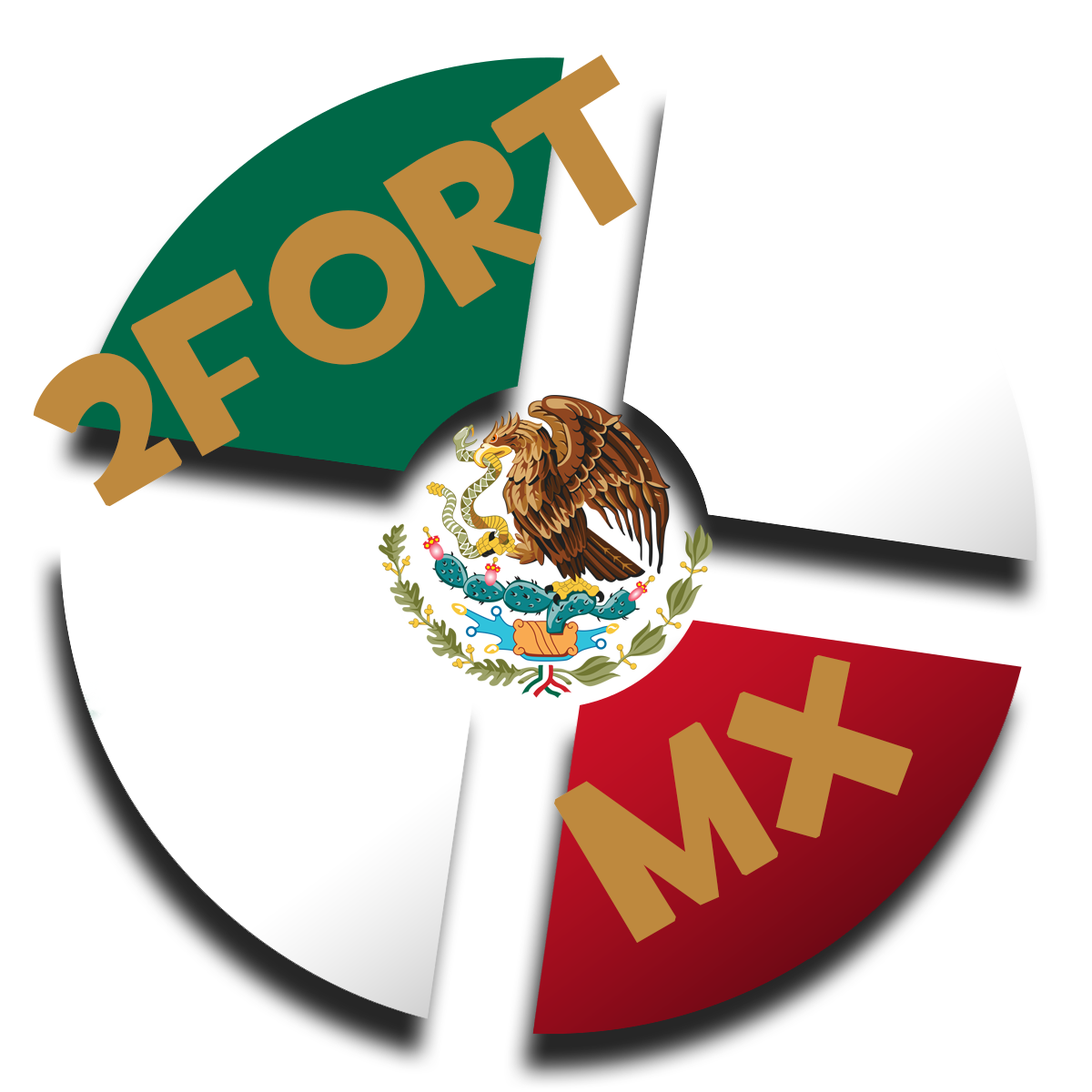
<style>
.page{position:relative;width:1092px;height:1092px;background:#ffffff}
.page>*{position:absolute;margin:0}
.t1{font:204.7px "TF2Build";color:#be893e;font-weight:bold}
.t2{font:227.5px "TF2Build";color:#be893e;font-weight:bold}
</style>
<div class="page">
<p class="t1" style="left:33px;top:55px;width:604px;height:452px;rotate:-30deg">2Fort</p>
<p class="t2" style="left:554px;top:654px;width:360px;height:289px;rotate:-30deg">MX</p>
</div>
